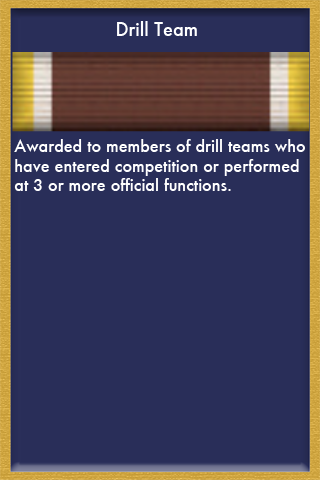
<style>
.page{position:relative;width:320px;height:480px;background:#292e59}
.page>*{position:absolute;margin:0}
.t1{font:18px "Futura-Medium";color:#ffffff}
.t2{font:16px "Futura-Medium";color:#ffffff}
</style>
<div class="page">
<p class="t1" style="left:117px;top:21px;width:80px;height:15px">Drill Team</p>
<p class="t2" style="left:14px;top:139px;width:291px;height:52px">Awarded to members of drill teams who <br>have entered competition or performed <br>at 3 or more official functions.</p>
</div>
